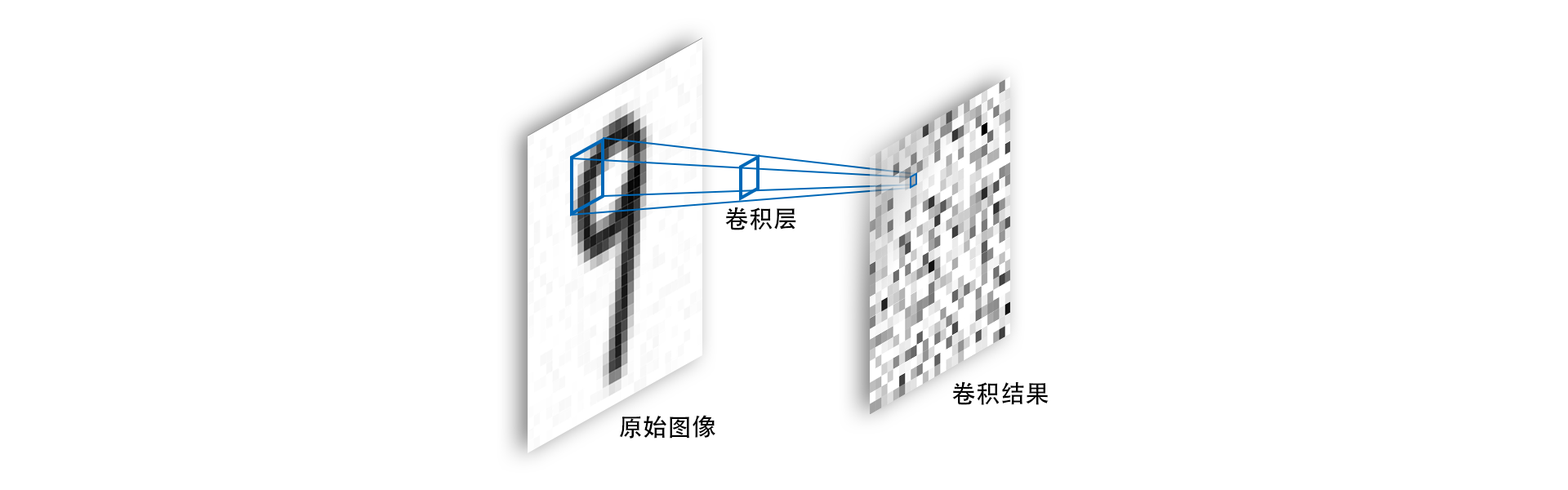
<style>
.page{position:relative;width:1568px;height:490px;background:#ffffff}
.page>*{position:absolute;margin:0}
.t1{font:24.5px "AdobeHeitiStd-Regular";color:#000000}
</style>
<div class="page">
<p class="t1" style="left:725px;top:207px;width:71px;height:23px">卷积层</p>
<p class="t1" style="left:952px;top:381px;width:97px;height:24px">卷积结果</p>
<p class="t1" style="left:619px;top:415px;width:96px;height:24px">原始图像</p>
</div>
